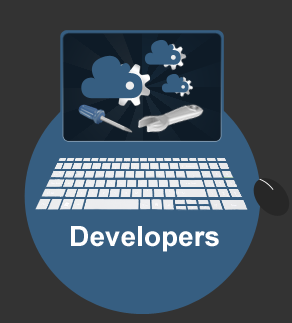
<style>
.page{position:relative;width:292px;height:323px;background:#333333}
.page>*{position:absolute;margin:0}
.t1{font:28px "Arial-BoldMT";color:#ffffff}
</style>
<div class="page">
<p class="t1" style="left:71px;top:226px;width:148px;height:26px">Developers</p>
</div>
